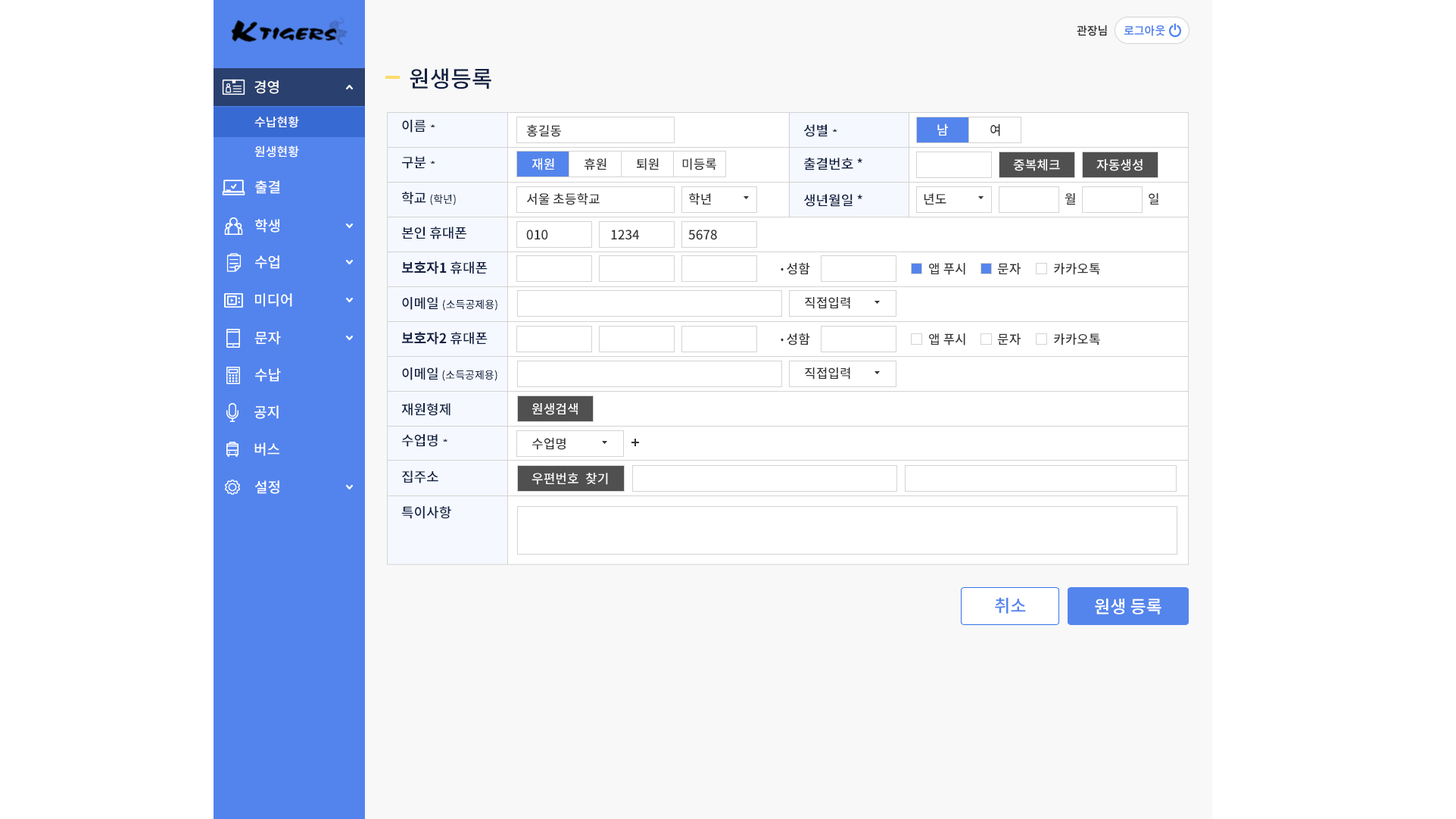
<style>
.page{position:relative;width:1456px;height:819px;background:#ffffff}
.page>*{position:absolute;margin:0}
.t1{font:11.4px "NotoSansCJKkr-Bold";color:#343434;text-transform:uppercase}
.t2{font:11.4px "NotoSansCJKkr-Bold";color:#5384ed;text-transform:uppercase}
.t3{font:22.7px "NotoSansCJKkr-Medium";color:#102042;text-transform:uppercase}
.t4{font:14.4px "NotoSansCJKkr-Medium";color:#ffffff;text-transform:uppercase}
.t5{font:12.1px "NotoSansCJKkr-Medium";color:#ffffff;text-transform:uppercase}
.t6{font:13.6px "NotoSansCJKkr-Medium";color:#102042;text-transform:uppercase}
.t7{font:8px "NotoSansCJKkr-Medium";color:#102042;text-transform:uppercase;scale:1.69 1}
.t8{font:12.9px "NotoSansCJKkr-Medium";color:#343434;text-transform:uppercase}
.t9{font:12.9px "NotoSansCJKkr-Medium";color:#ffffff;text-transform:uppercase}
.t10{font:10.6px "NotoSansCJKkr-Medium";color:#102042;text-transform:uppercase}
.t11{font:13.6px "NotoSansCJKkr-Bold";color:#102042;text-transform:uppercase}
.t12{font:3px "NotoSansCJKkr-Medium";color:#343434;text-transform:uppercase}
.t13{font:17.4px "NotoSansCJKkr-Medium";color:#5485ec;text-transform:uppercase}
.t14{font:17.4px "NotoSansCJKkr-Medium";color:#ffffff;text-transform:uppercase}
</style>
<div class="page">
<p class="t1" style="left:1077px;top:25px;width:30px;height:11px">관장님</p>
<p class="t2" style="left:1124px;top:25px;width:42px;height:11px">로그아웃</p>
<p class="t3" style="left:410px;top:68px;width:82px;height:21px">원생등록</p>
<p class="t4" style="left:254px;top:80px;width:25px;height:14px">경영</p>
<p class="t5" style="left:254px;top:116px;width:45px;height:12px">수납현황</p>
<p class="t6" style="left:402px;top:120px;width:33px;height:13px">이름 <span class="t7">*</span></p>
<p class="t8" style="left:526px;top:124px;width:35px;height:13px">홍길동</p>
<p class="t6" style="left:804px;top:124px;width:34px;height:13px">성별 <span class="t7">*</span></p>
<p class="t9" style="left:938px;top:123px;width:10px;height:13px">남</p>
<p class="t8" style="left:991px;top:123px;width:10px;height:13px">여</p>
<p class="t5" style="left:254px;top:145px;width:45px;height:13px">원생현황</p>
<p class="t6" style="left:402px;top:156px;width:33px;height:13px">구분 <span class="t7">*</span></p>
<p class="t9" style="left:532px;top:158px;width:22px;height:12px">재원</p>
<p class="t8" style="left:585px;top:158px;width:22px;height:12px">휴원</p>
<p class="t8" style="left:637px;top:158px;width:22px;height:12px">퇴원</p>
<p class="t8" style="left:682px;top:158px;width:34px;height:12px">미등록</p>
<p class="t6" style="left:804px;top:158px;width:59px;height:12px">출결번호 *</p>
<p class="t9" style="left:1013px;top:159px;width:47px;height:12px">중복체크</p>
<p class="t9" style="left:1097px;top:159px;width:46px;height:12px">자동생성</p>
<p class="t4" style="left:255px;top:180px;width:25px;height:14px">출결</p>
<p class="t10" style="left:402px;top:192px;width:54px;height:13px"><span class="t6">학교 </span>(학년)</p>
<p class="t8" style="left:526px;top:193px;width:74px;height:12px">서울 초등학교</p>
<p class="t8" style="left:689px;top:193px;width:22px;height:12px">학년</p>
<p class="t6" style="left:804px;top:194px;width:59px;height:13px">생년월일 *</p>
<p class="t8" style="left:924px;top:193px;width:23px;height:11px">년도</p>
<p class="t8" style="left:1066px;top:193px;width:9px;height:12px">월</p>
<p class="t8" style="left:1149px;top:193px;width:10px;height:11px">일</p>
<p class="t4" style="left:255px;top:219px;width:24px;height:14px">학생</p>
<p class="t6" style="left:402px;top:226px;width:65px;height:13px">본인 휴대폰</p>
<p class="t8" style="left:526px;top:229px;width:22px;height:11px">010</p>
<p class="t8" style="left:611px;top:229px;width:28px;height:11px">1234</p>
<p class="t8" style="left:688px;top:229px;width:29px;height:11px">5678</p>
<p class="t4" style="left:255px;top:255px;width:24px;height:14px">수업</p>
<p class="t11" style="left:402px;top:261px;width:86px;height:13px">보호자1<span class="t6"> 휴대폰</span></p>
<p class="t8" style="left:781px;top:262px;width:29px;height:13px"><span class="t12">●    </span>성함</p>
<p class="t8" style="left:929px;top:263px;width:37px;height:12px">앱 푸시</p>
<p class="t8" style="left:997px;top:263px;width:24px;height:12px">문자</p>
<p class="t8" style="left:1054px;top:263px;width:46px;height:12px">카카오톡</p>
<p class="t4" style="left:255px;top:293px;width:37px;height:14px">미디어</p>
<p class="t10" style="left:402px;top:297px;width:96px;height:14px"><span class="t6">이메일 </span>(소득공제용)</p>
<p class="t8" style="left:805px;top:297px;width:46px;height:12px">직접입력</p>
<p class="t4" style="left:254px;top:331px;width:27px;height:14px">문자</p>
<p class="t11" style="left:402px;top:332px;width:86px;height:13px">보호자2 <span class="t6">휴대폰</span></p>
<p class="t8" style="left:781px;top:332px;width:29px;height:13px"><span class="t12">●    </span>성함</p>
<p class="t8" style="left:929px;top:333px;width:37px;height:12px">앱 푸시</p>
<p class="t8" style="left:997px;top:333px;width:24px;height:12px">문자</p>
<p class="t8" style="left:1054px;top:333px;width:46px;height:12px">카카오톡</p>
<p class="t4" style="left:255px;top:368px;width:26px;height:14px">수납</p>
<p class="t10" style="left:402px;top:367px;width:96px;height:14px"><span class="t6">이메일 </span>(소득공제용)</p>
<p class="t8" style="left:805px;top:367px;width:46px;height:12px">직접입력</p>
<p class="t4" style="left:254px;top:405px;width:25px;height:14px">공지</p>
<p class="t6" style="left:401px;top:403px;width:50px;height:13px">재원형제</p>
<p class="t9" style="left:532px;top:403px;width:46px;height:12px">원생검색</p>
<p class="t6" style="left:402px;top:434px;width:46px;height:13px">수업명 <span class="t7">*</span></p>
<p class="t8" style="left:532px;top:437px;width:34px;height:13px">수업명</p>
<p class="t4" style="left:254px;top:442px;width:25px;height:14px">버스</p>
<p class="t6" style="left:402px;top:470px;width:37px;height:13px">집주소</p>
<p class="t9" style="left:532px;top:473px;width:76px;height:12px">우편번호 찾기</p>
<p class="t4" style="left:254px;top:480px;width:25px;height:14px">설정</p>
<p class="t6" style="left:401px;top:506px;width:50px;height:13px">특이사항</p>
<p class="t13" style="left:995px;top:598px;width:31px;height:15px">취소</p>
<p class="t14" style="left:1095px;top:598px;width:67px;height:16px">원생 등록</p>
</div>
